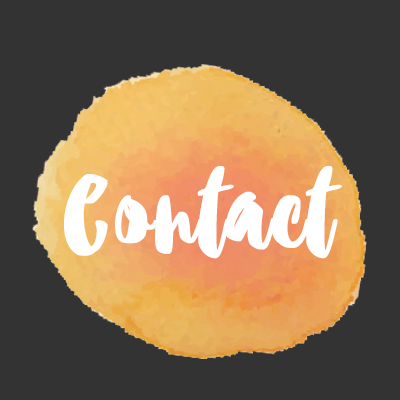
<style>
.page{position:relative;width:400px;height:400px;background:#333333}
.page>*{position:absolute;margin:0}
.t1{font:86.7px "Stonestickfreetester";color:#ffffff;font-weight:bold}
</style>
<div class="page">
<p class="t1" style="left:64px;top:166px;width:278px;height:93px">Contact</p>
</div>
